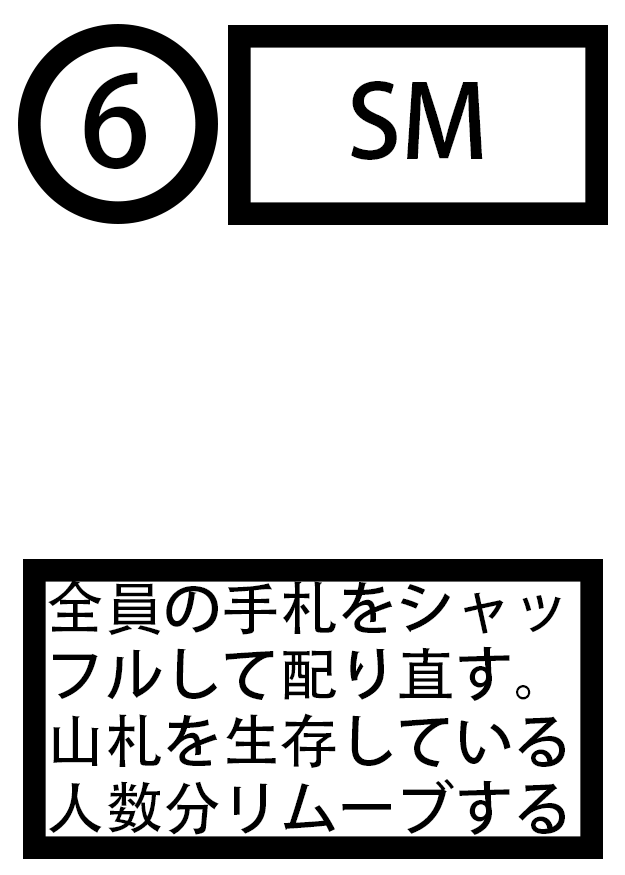
<style>
.page{position:relative;width:625px;height:875px;background:#ffffff}
.page>*{position:absolute;margin:0}
.t1{font:125px "AdobeHeitiStd-Regular";color:#000000}
.t2{font:100px "AdobeHeitiStd-Regular";color:#000000}
.t3{font:58.3px/66.7px "AdobeHeitiStd-Regular";color:#000000}
</style>
<div class="page">
<p class="t1" style="left:84px;top:72px;width:62px;height:98px">6</p>
<p class="t2" style="left:351px;top:81px;width:132px;height:79px">SM</p>
<p class="t3" style="left:48px;top:580px;width:517px;height:255px">全員の手札をシャッフルして配り直す。山札を生存している人数分リムーブする</p>
</div>
